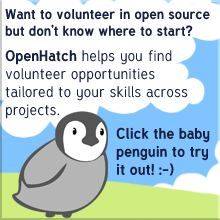
<style>
.page{position:relative;width:220px;height:220px;background:#ffffff}
.page>*{position:absolute;margin:0}
.t1{font:15px "Tuffy";color:#182041}
.t2{font:14px "Tuffy-Bold";color:#182041}
.t3{font:15px "Tuffy-Bold";color:#182041}
</style>
<div class="page">
<p class="t1" style="left:5px;top:8px;width:205px;height:111px"><span class="t2">Want to volunteer in open source but don’t know where to start?<br><br></span><span class="t3">OpenHatch</span> helps you find <br>volunteer opportunities <br>tailored to your skills across projects.</p>
<p class="t3" style="left:116px;top:127px;width:94px;height:49px">Click the baby penguin to try it out! :-)</p>
</div>
